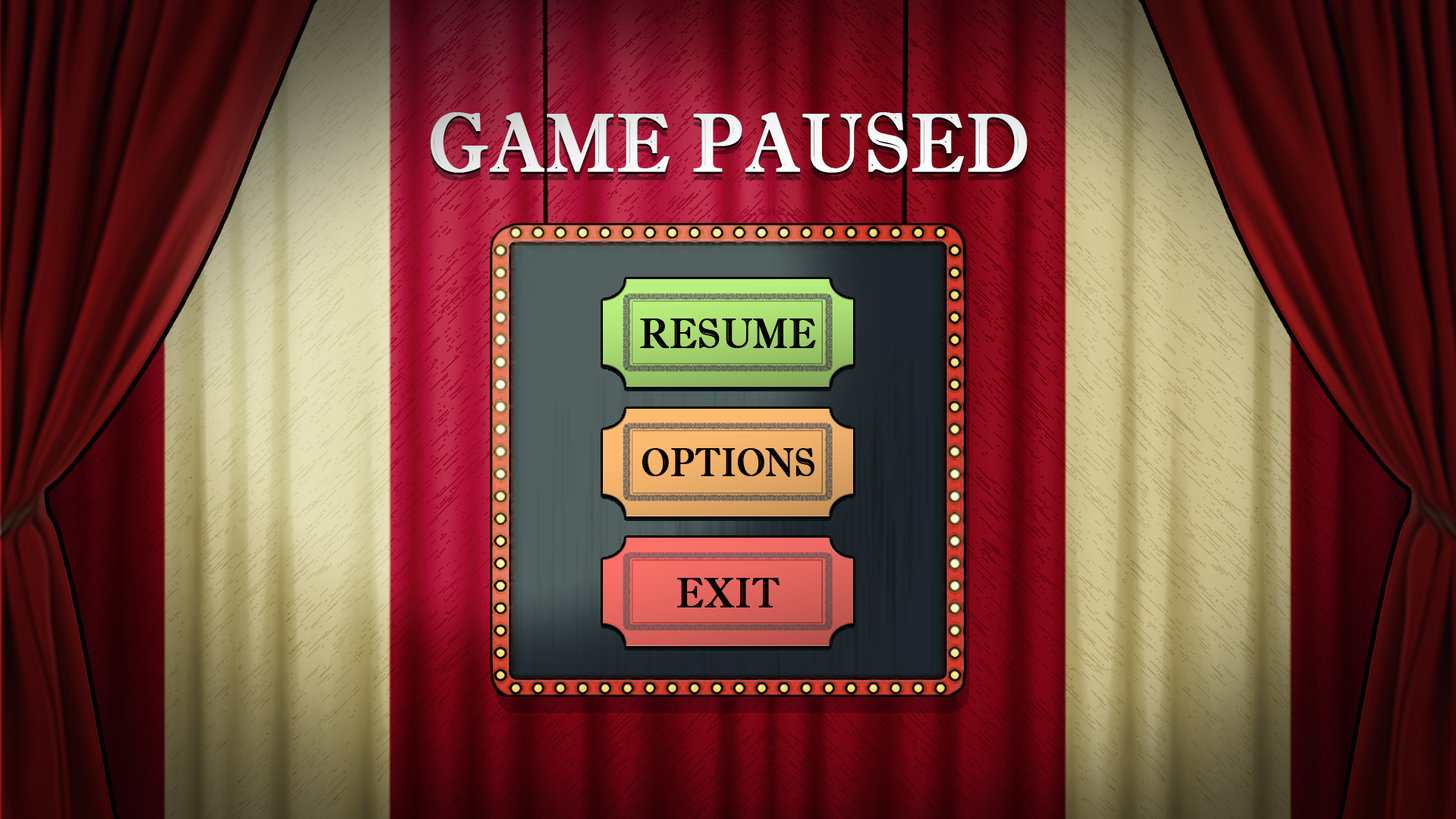
<style>
.page{position:relative;width:1456px;height:819px}
.page>*{position:absolute;margin:0}
.t1{font:82.5px "ImprintMT-Shadow";color:#ffffff;text-transform:uppercase;font-weight:bold;scale:0.9 1}
.t2{font:41.7px "ImprintMT-Shadow";color:#060001;text-transform:uppercase;font-weight:bold;scale:0.9 1}
.t3{font:39.7px "ImprintMT-Shadow";color:#060001;text-transform:uppercase;font-weight:bold;scale:0.87 1}
</style>
<div class="page">
<p class="t1" style="left:430px;top:112px;width:598px;height:61px">GAME PAUSED</p>
<p class="t2" style="left:640px;top:318px;width:176px;height:30px">resume</p>
<p class="t3" style="left:642px;top:448px;width:173px;height:29px">OPTIONS</p>
<p class="t2" style="left:677px;top:578px;width:103px;height:29px">exit</p>
</div>
